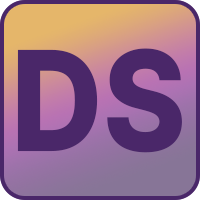
<style>
.page{position:relative;width:200px;height:200px;background:#4a2769}
.page>*{position:absolute;margin:0}
.t1{font:138.6px "Inter-ExtraBold";color:#4a2769;text-transform:uppercase;scale:0.91 1}
</style>
<div class="page">
<p class="t1" style="left:17px;top:48px;width:165px;height:105px">DS</p>
</div>
